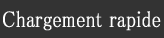
<style>
.page{position:relative;width:164px;height:38px;background:#333333}
.page>*{position:absolute;margin:0}
.t1{font:22.8px "MS-PMincho";color:#ffffff;font-weight:bold;scale:0.84 1}
</style>
<div class="page">
<p class="t1" style="left:3px;top:10px;width:158px;height:21px">Chargement rapide</p>
</div>
